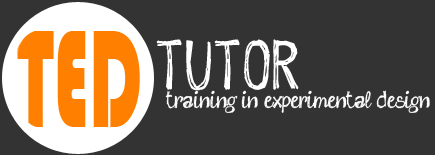
<style>
.page{position:relative;width:435px;height:155px;background:#333333}
.page>*{position:absolute;margin:0}
.t1{font:72px "sketch-me_FREE-version";color:#ffffff}
.t2{font:24px "sketch-me_FREE-version";color:#ffffff}
</style>
<div class="page">
<p class="t1" style="left:156px;top:39px;width:143px;height:52px">TUTOR</p>
<p class="t2" style="left:165px;top:90px;width:265px;height:23px">training in experimental design</p>
</div>
